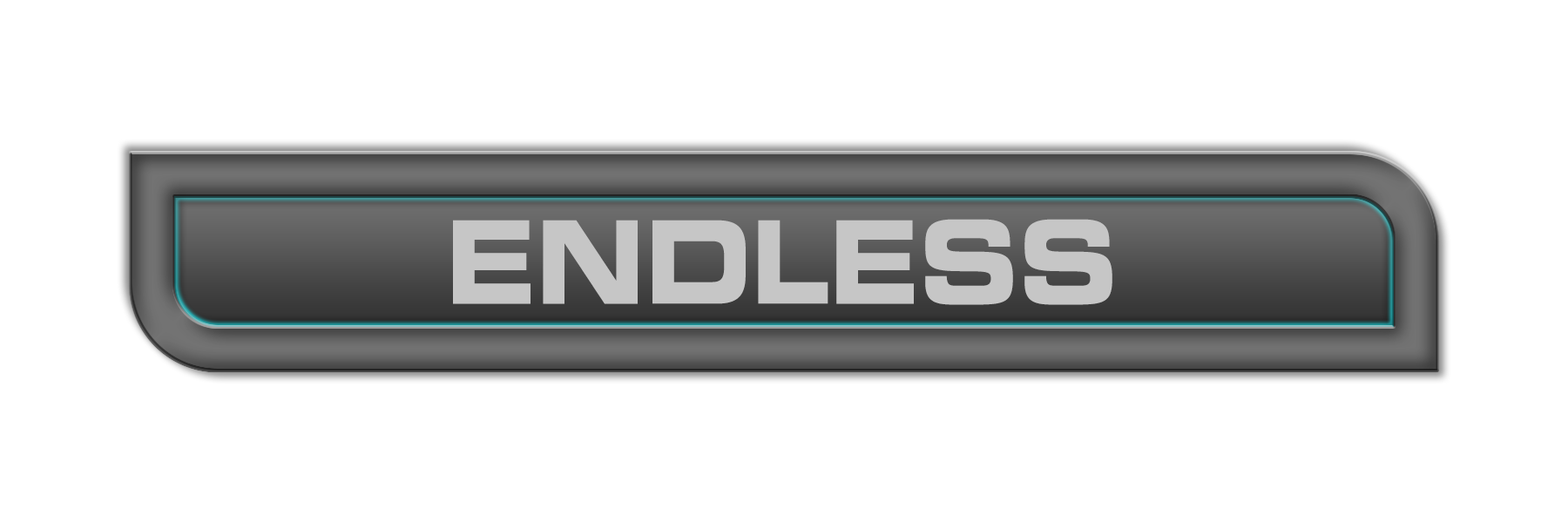
<style>
.page{position:relative;width:1568px;height:523px;background:#ffffff}
.page>*{position:absolute;margin:0}
.t1{font:115px "EurostileLTStd-BoldEx2";color:#c6c6c6;scale:0.83 1}
</style>
<div class="page">
<p class="t1" style="left:453px;top:219px;width:659px;height:86px">ENDLESS</p>
</div>
